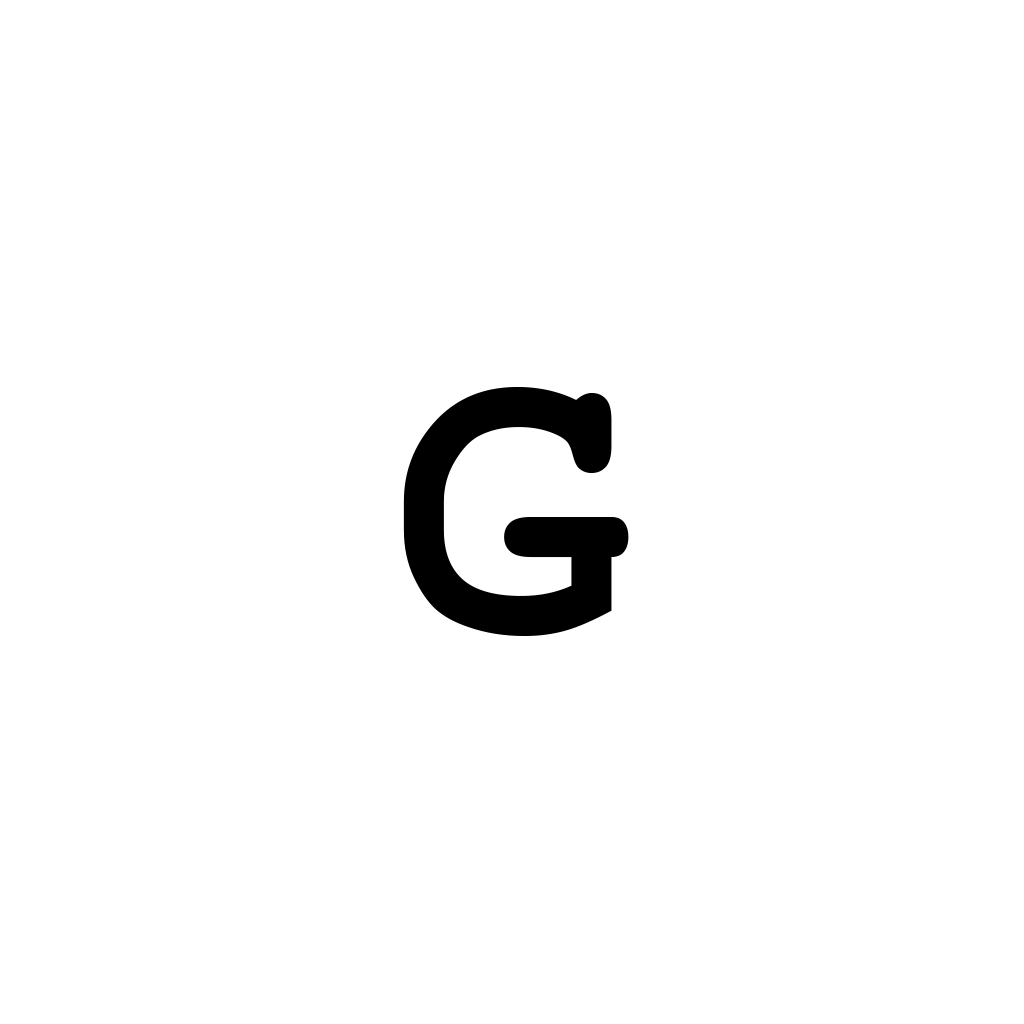
<style>
.page{position:relative;width:1024px;height:1024px;background:#ffffff}
.page>*{position:absolute;margin:0}
.t1{font:400px "CourierNewPS-BoldMT";color:#000000}
</style>
<div class="page">
<p class="t1" style="left:403px;top:387px;width:226px;height:249px">G</p>
</div>
